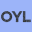
<style>
.page{position:relative;width:32px;height:32px;background:#9cb4f9}
.page>*{position:absolute;margin:0}
.t1{font:14.4px "REVOLUTIONII";color:#373839}
</style>
<div class="page">
<p class="t1" style="left:1px;top:11px;width:30px;height:12px">OYL</p>
</div>
